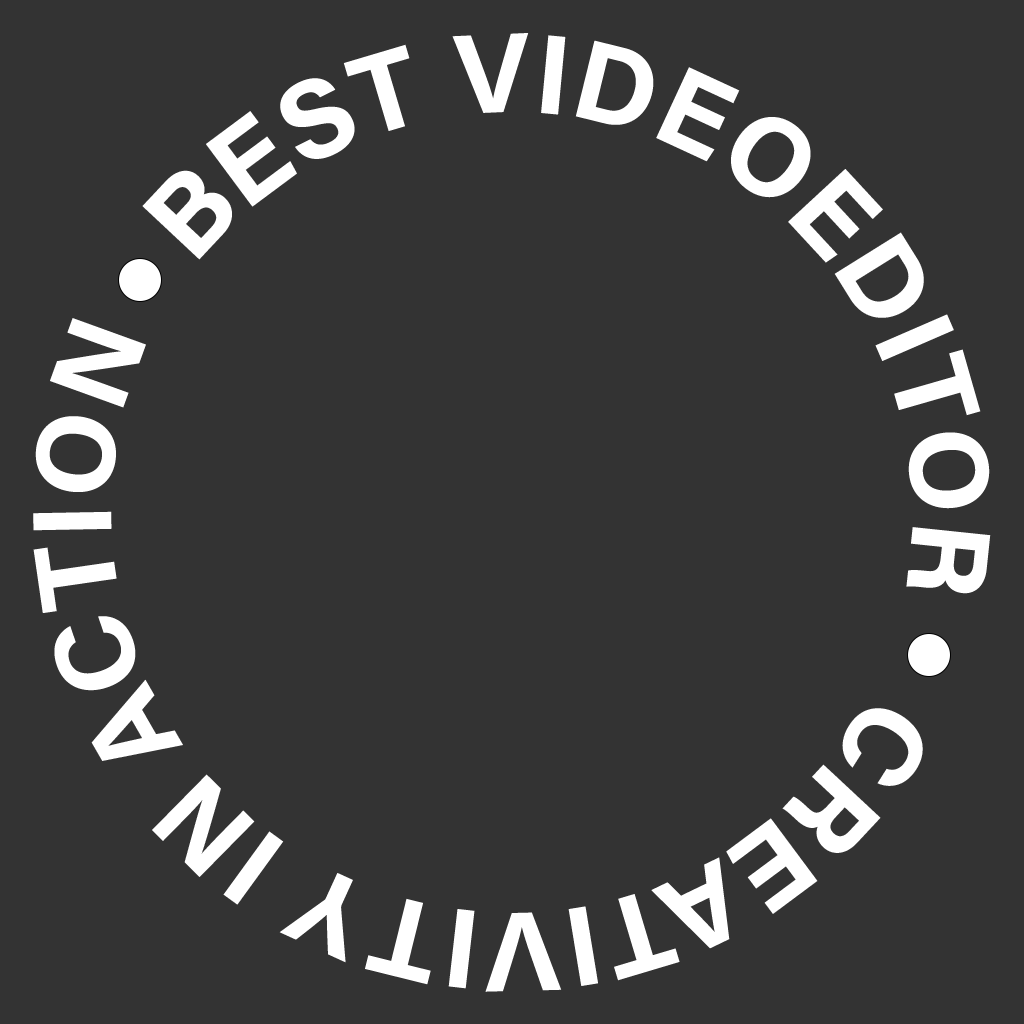
<style>
.page{position:relative;width:1024px;height:1024px;background:#333333}
.page>*{position:absolute;margin:0}
.t1{font:112.7px "AcuminConcept-Bold";color:#ffffff;text-transform:uppercase}
</style>
<div class="page">
<p class="t1" style="left:33px;top:33px;width:958px;height:959px;text-align:center">Creativity in Action   best videoeditor</p>
</div>
